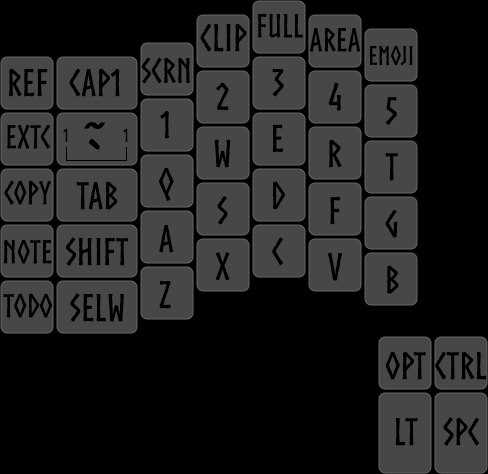
<style>
.page{position:relative;width:488px;height:474px;background:#000000}
.page>*{position:absolute;margin:0}
.t1{font:32px "Norse-Bold";color:#000000}
.t2{font:37px "Norse-Bold";color:#000000}
.t3{font:26px "Norse-Bold";color:#000000}
.t4{font:34px "Norse-Bold";color:#000000}
.t5{font:37px "PermanentMarkerPro";color:#000000}
.t6{font:18px "Norse-Bold";color:#000000}
</style>
<div class="page">
<p class="t1" style="left:258px;top:13px;width:45px;height:25px">Full</p>
<p class="t2" style="left:200px;top:23px;width:47px;height:29px">Clip</p>
<p class="t1" style="left:309px;top:27px;width:52px;height:25px">Area</p>
<p class="t3" style="left:369px;top:45px;width:44px;height:21px">Emoji</p>
<p class="t4" style="left:141px;top:57px;width:49px;height:27px">Scrn</p>
<p class="t2" style="left:9px;top:68px;width:39px;height:29px">REF</p>
<p class="t2" style="left:69px;top:68px;width:51px;height:29px">Cap1</p>
<p class="t2" style="left:272px;top:68px;width:12px;height:29px">3</p>
<p class="t2" style="left:216px;top:82px;width:13px;height:29px">2</p>
<p class="t2" style="left:328px;top:82px;width:13px;height:29px">4</p>
<p class="t2" style="left:385px;top:97px;width:12px;height:28px">5</p>
<p class="t2" style="left:160px;top:110px;width:9px;height:29px">1</p>
<p class="t1" style="left:7px;top:124px;width:44px;height:25px">EXTC</p>
<p class="t5" style="left:84px;top:122px;width:21px;height:7px">~</p>
<p class="t2" style="left:272px;top:124px;width:11px;height:28px">e</p>
<p class="t6" style="left:63px;top:128px;width:5px;height:14px">1</p>
<p class="t6" style="left:123px;top:128px;width:5px;height:14px">1</p>
<p class="t5" style="left:89px;top:138px;width:11px;height:12px">`</p>
<p class="t2" style="left:214px;top:139px;width:17px;height:29px">w</p>
<p class="t2" style="left:329px;top:139px;width:13px;height:29px">r</p>
<p class="t2" style="left:385px;top:153px;width:13px;height:28px">t</p>
<p class="t2" style="left:159px;top:167px;width:15px;height:34px">q</p>
<p class="t1" style="left:4px;top:180px;width:47px;height:25px">Copy</p>
<p class="t2" style="left:76px;top:181px;width:42px;height:29px">Tab</p>
<p class="t2" style="left:273px;top:181px;width:12px;height:29px">D</p>
<p class="t2" style="left:217px;top:196px;width:11px;height:29px">S</p>
<p class="t2" style="left:330px;top:197px;width:10px;height:28px">F</p>
<p class="t2" style="left:385px;top:209px;width:13px;height:29px">G</p>
<p class="t2" style="left:159px;top:225px;width:15px;height:28px">A</p>
<p class="t1" style="left:4px;top:239px;width:48px;height:25px">Note</p>
<p class="t2" style="left:66px;top:237px;width:63px;height:29px">Shift</p>
<p class="t2" style="left:272px;top:237px;width:12px;height:29px">c</p>
<p class="t2" style="left:215px;top:252px;width:15px;height:29px">x</p>
<p class="t2" style="left:327px;top:252px;width:16px;height:29px">v</p>
<p class="t2" style="left:387px;top:265px;width:12px;height:29px">b</p>
<p class="t2" style="left:159px;top:281px;width:12px;height:28px">z</p>
<p class="t1" style="left:3px;top:293px;width:49px;height:25px">ToDO</p>
<p class="t2" style="left:70px;top:293px;width:54px;height:29px">SelW</p>
<p class="t2" style="left:385px;top:351px;width:41px;height:29px">Opt</p>
<p class="t2" style="left:435px;top:351px;width:52px;height:29px">Ctrl</p>
<p class="t2" style="left:395px;top:417px;width:23px;height:29px">LT</p>
<p class="t2" style="left:443px;top:417px;width:37px;height:29px">Spc</p>
</div>
